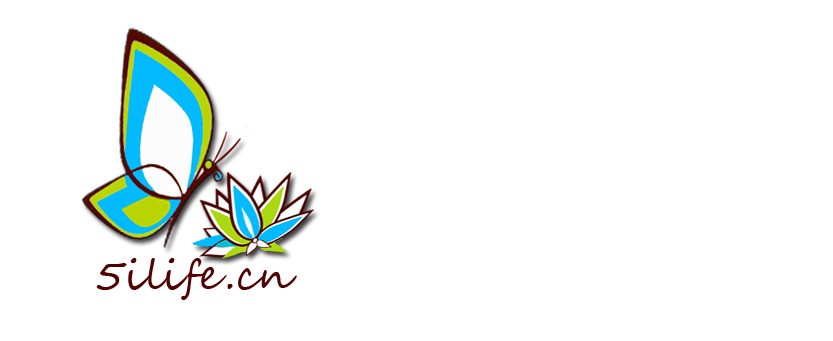
<style>
.page{position:relative;width:833px;height:341px;background:#ffffff}
.page>*{position:absolute;margin:0}
.t1{font:41.7px "SegoeScript";color:#510101}
</style>
<div class="page">
<p class="t1" style="left:96px;top:258px;width:201px;height:42px">5ilife.cn</p>
</div>
